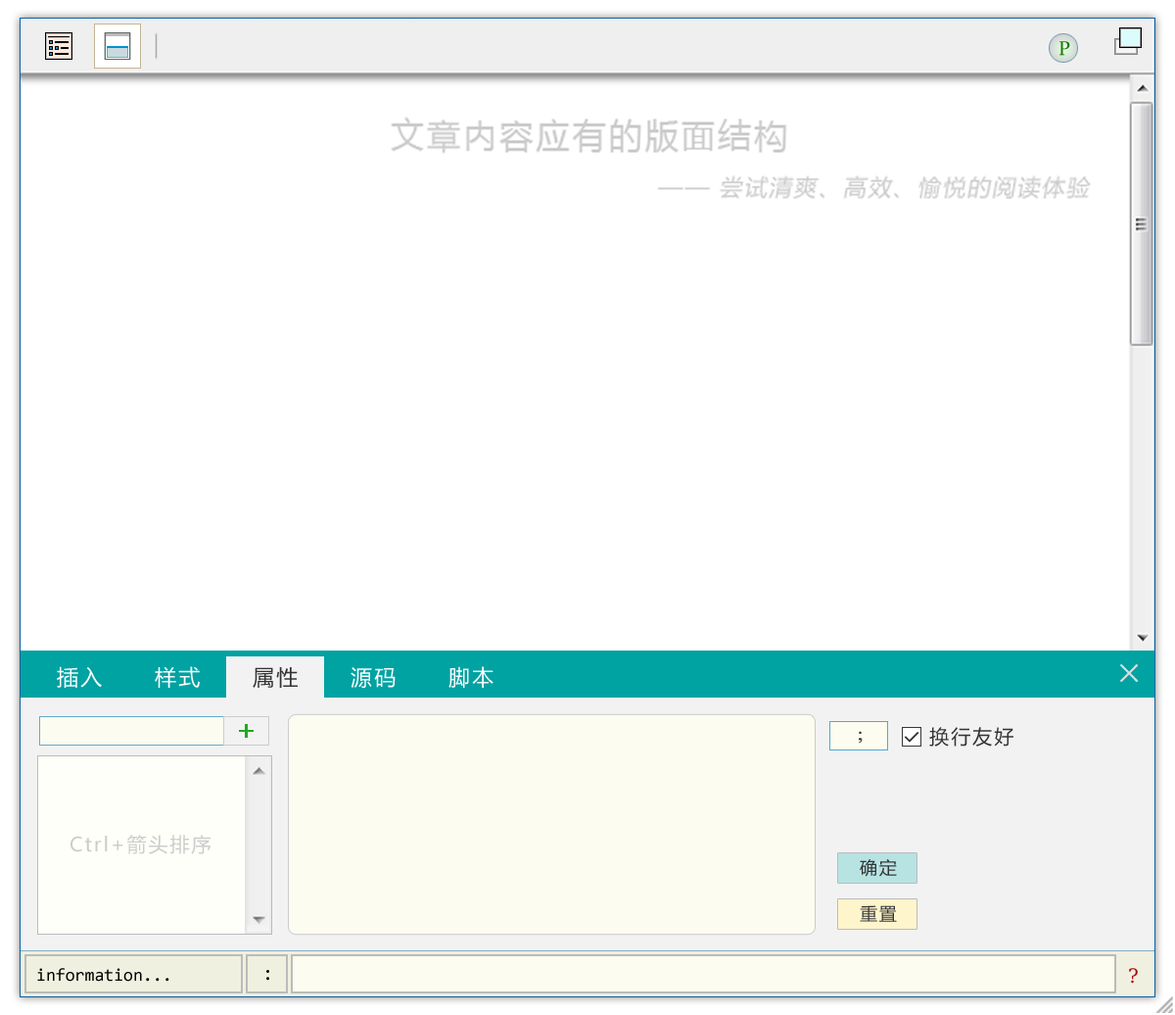
<style>
.page{position:relative;width:1175px;height:1015px;background:#ffffff}
.page>*{position:absolute;margin:0}
.t1{font:19.6px "Constantia";color:#1b7802}
.t2{font:21.5px "MicrosoftYaHei";letter-spacing:0.1em;color:#ffffff}
.t3{font:27.4px "NSimSun";letter-spacing:0.1em;color:#dddddd;font-weight:bold}
.t4{font:21.5px "MicrosoftYaHei";letter-spacing:0.1em;color:#333333}
.t5{font:17.6px "TimesNewRomanPSMT";letter-spacing:0.1em;color:#333333;font-weight:bold}
.t6{font:19.6px "MicrosoftYaHei";letter-spacing:0.1em;color:#333333}
.t7{font:19.6px "MicrosoftYaHei";letter-spacing:0.1em;color:#cccccc}
.t8{font:17.6px "MicrosoftYaHei";letter-spacing:0.1em;color:#333333}
.t9{font:17.6px "Consolas";color:#000000}
.t10{font:19.6px "Consolas";color:#000000}
.t11{font:19.6px "DejaVuSerif";color:#aa0000}
</style>
<div class="page">
<p class="t1" style="left:1060px;top:41px;width:10px;height:15px">P</p>
<p class="t2" style="left:57px;top:666px;width:45px;height:22px">插入</p>
<p class="t2" style="left:155px;top:666px;width:45px;height:22px">样式</p>
<p class="t2" style="left:449px;top:666px;width:45px;height:22px">脚本</p>
<p class="t3" style="left:1120px;top:664px;width:19px;height:18px">×</p>
<p class="t4" style="left:253px;top:667px;width:45px;height:21px">属性</p>
<p class="t2" style="left:351px;top:667px;width:45px;height:21px">源码</p>
<p class="t5" style="left:859px;top:731px;width:4px;height:12px">;</p>
<p class="t6" style="left:929px;top:727px;width:85px;height:19px">换行友好</p>
<p class="t7" style="left:71px;top:834px;width:140px;height:20px">Ctrl+箭头排序</p>
<p class="t8" style="left:860px;top:859px;width:37px;height:18px">确定</p>
<p class="t8" style="left:860px;top:905px;width:37px;height:17px">重置</p>
<p class="t9" style="left:37px;top:968px;width:132px;height:13px">information...</p>
<p class="t10" style="left:266px;top:970px;width:3px;height:10px">:</p>
<p class="t11" style="left:1129px;top:968px;width:9px;height:15px">?</p>
</div>
